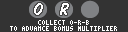
<style>
.page{position:relative;width:128px;height:32px;background:#333333}
.page>*{position:absolute;margin:0}
.t1{font:18px "DomDiagonalBT-Regular";letter-spacing:0.075em;color:#ffffff}
.t2{font:6px "Terminal";color:#ffffff}
</style>
<div class="page">
<p class="t1" style="left:34px;top:3px;width:9px;height:12px">O</p>
<p class="t1" style="left:60px;top:3px;width:9px;height:12px">R</p>
<p class="t2" style="left:10px;top:26px;width:107px;height:5px">TO ADVANCE BONUS MULTIPLIER</p>
<p class="t2" style="left:38px;top:20px;width:51px;height:5px">COLLECT O-R-B</p>
</div>
